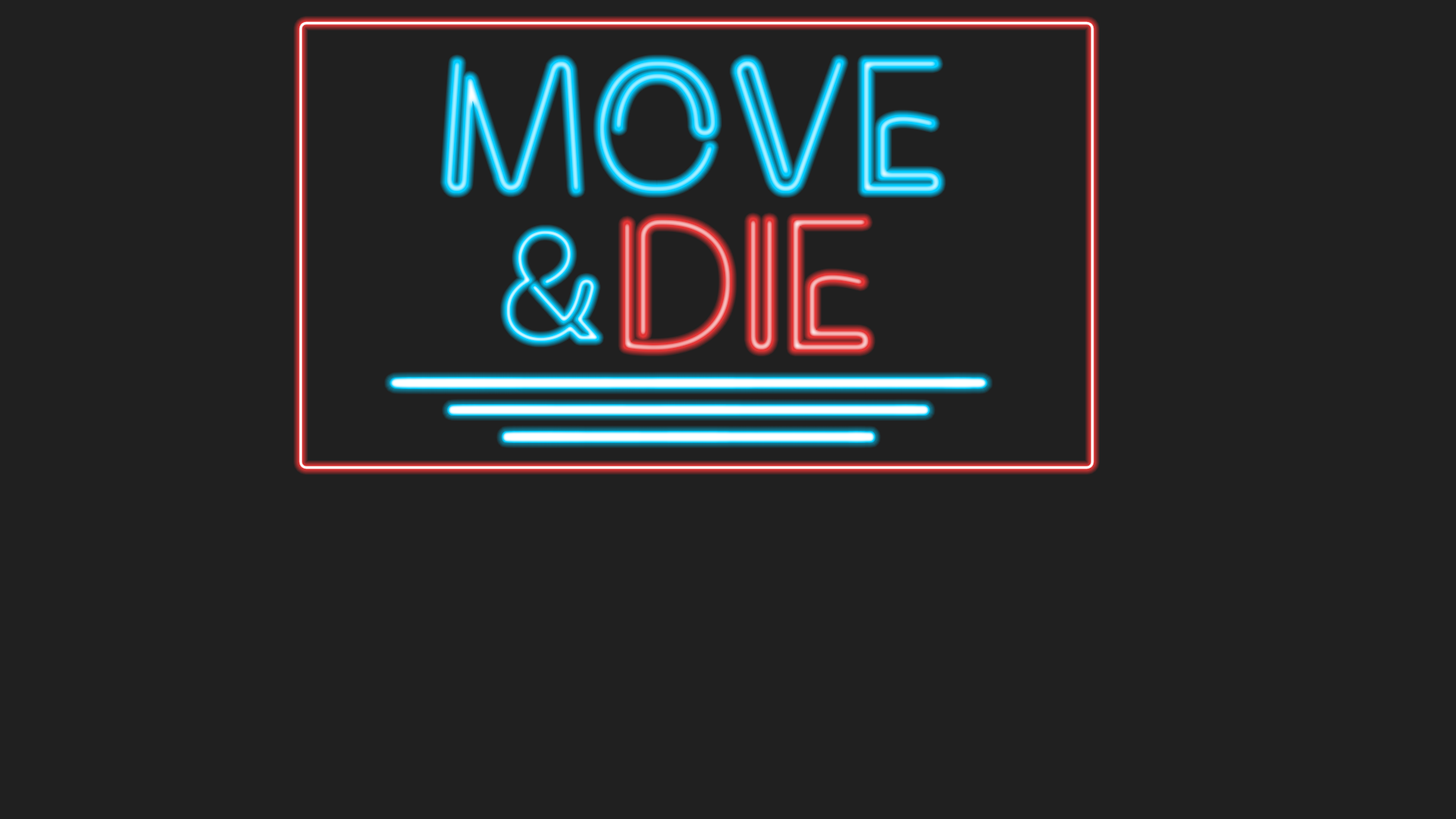
<style>
.page{position:relative;width:1456px;height:819px;background:#202020}
.page>*{position:absolute;margin:0}
.t1{font:189.6px "Clip"}
.t2{font:151.7px "Clip"}
</style>
<div class="page">
<p class="t1" style="left:445px;top:59px;width:496px;height:134px">MOVE</p>
<p class="t1" style="left:623px;top:218px;width:248px;height:133px">DIE</p>
<p class="t2" style="left:505px;top:230px;width:94px;height:112px">&amp;</p>
</div>
